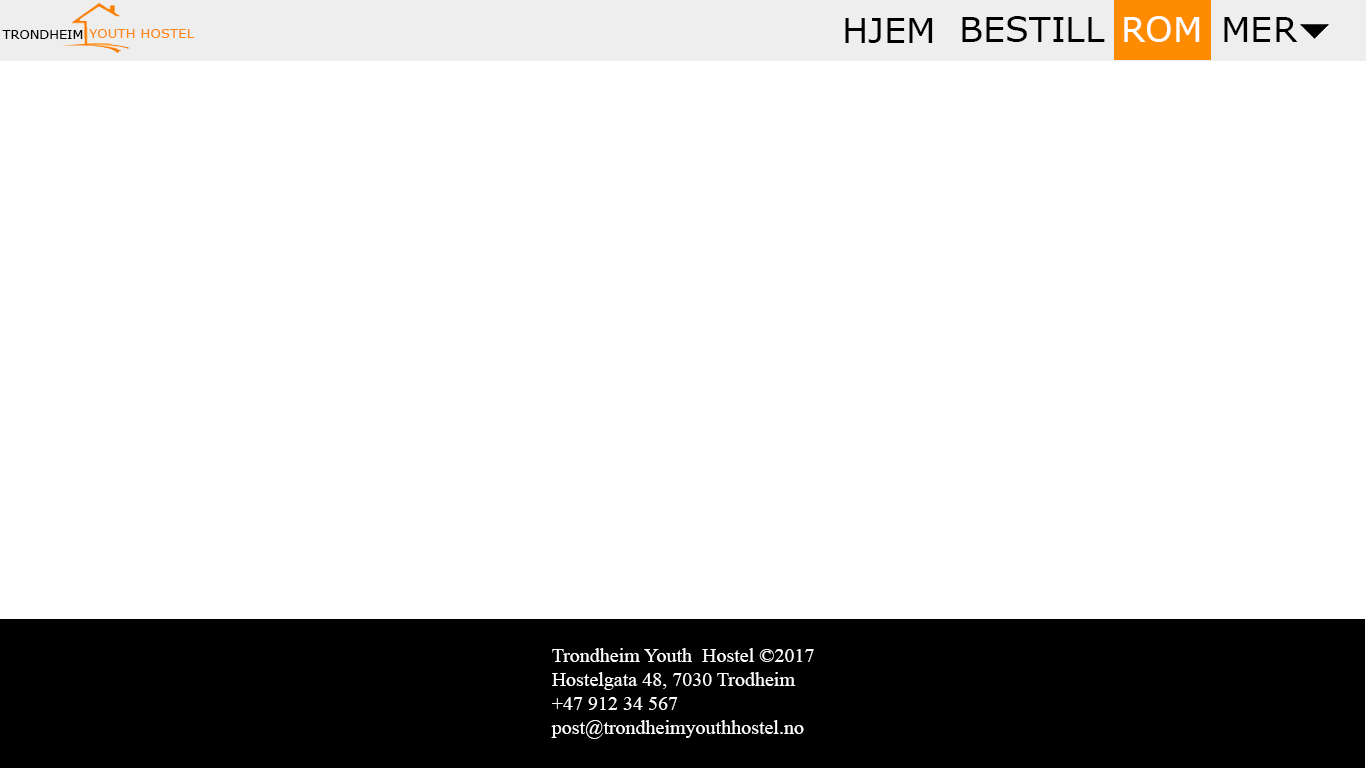
<style>
.page{position:relative;width:1366px;height:768px;background:#ffffff}
.page>*{position:absolute;margin:0}
.t1{font:35px "Verdana";color:#000000}
.t2{font:35px "Verdana";color:#ffffff}
.t3{font:12.9px "Verdana";color:#000000}
.t4{font:13.3px "Verdana";color:#fe8714}
.t5{font:20px "TimesNewRomanPSMT";color:#ffffff}
</style>
<div class="page">
<p class="t1" style="left:962px;top:16px;width:143px;height:26px">BESTILL</p>
<p class="t2" style="left:1124px;top:16px;width:76px;height:26px">ROM</p>
<p class="t1" style="left:1224px;top:17px;width:74px;height:25px">MER</p>
<p class="t3" style="left:2px;top:30px;width:81px;height:9px">TRONDHEIM</p>
<p class="t4" style="left:89px;top:29px;width:106px;height:9px">YOUTH HOSTEL</p>
<p class="t1" style="left:845px;top:18px;width:88px;height:25px">HJEM</p>
<p class="t5" style="left:551px;top:648px;width:263px;height:91px">Trondheim Youth  Hostel ©2017<br>Hostelgata 48, 7030 Trodheim<br>+47 912 34 567<br>post@trondheimyouthhostel.no</p>
</div>
